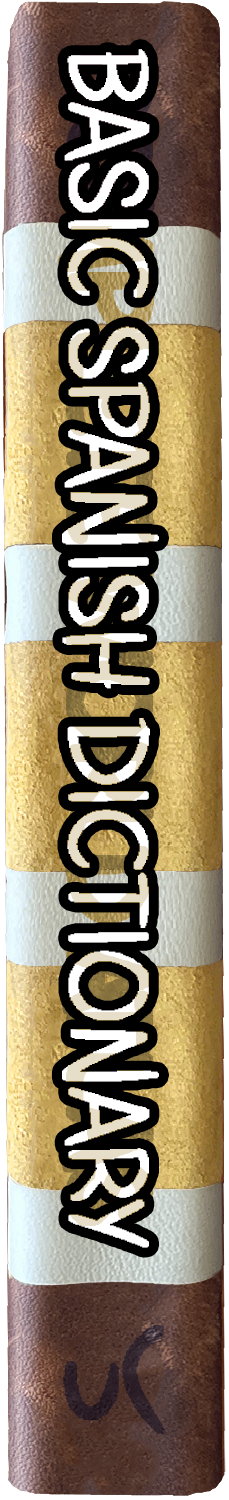
<style>
.page{position:relative;width:229px;height:1500px}
.page>*{position:absolute;margin:0}
.t1{font:112.3px "GavinScript2";font-weight:bold;scale:0.85 1}
.t2{font:150.4px "GavinScript2";color:#42353d}
</style>
<div class="page">
<p class="t1" style="left:62px;top:49px;width:97px;height:1199px;rotate:90deg">BASIC SPANISH DICTIONARY</p>
<p class="t2" style="left:65px;top:1327px;width:99px;height:105px">7</p>
<p class="t2" style="left:65px;top:1327px;width:99px;height:105px">7</p>
</div>
